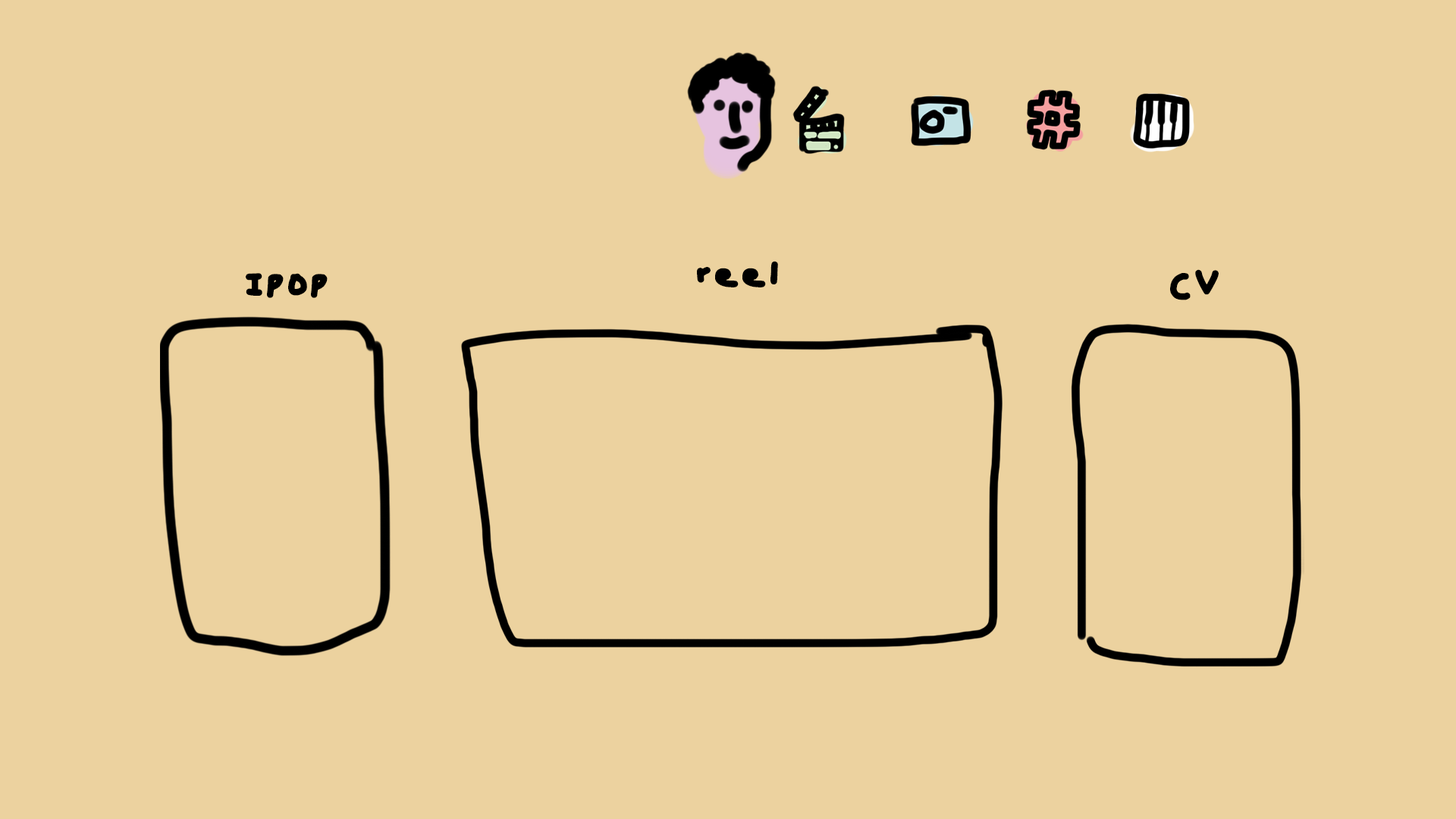
<style>
.page{position:relative;width:1456px;height:819px;background:#ecd29f}
.page>*{position:absolute;margin:0}
.t1{font:43.4px "Joanet-Regular";color:#000000}
.t2{font:42.5px "Joanet-Regular";color:#000000}
</style>
<div class="page">
<p class="t1" style="left:697px;top:261px;width:81px;height:26px">reel</p>
<p class="t1" style="left:1170px;top:269px;width:49px;height:31px">CV</p>
<p class="t2" style="left:246px;top:273px;width:82px;height:25px">IPOP</p>
</div>
